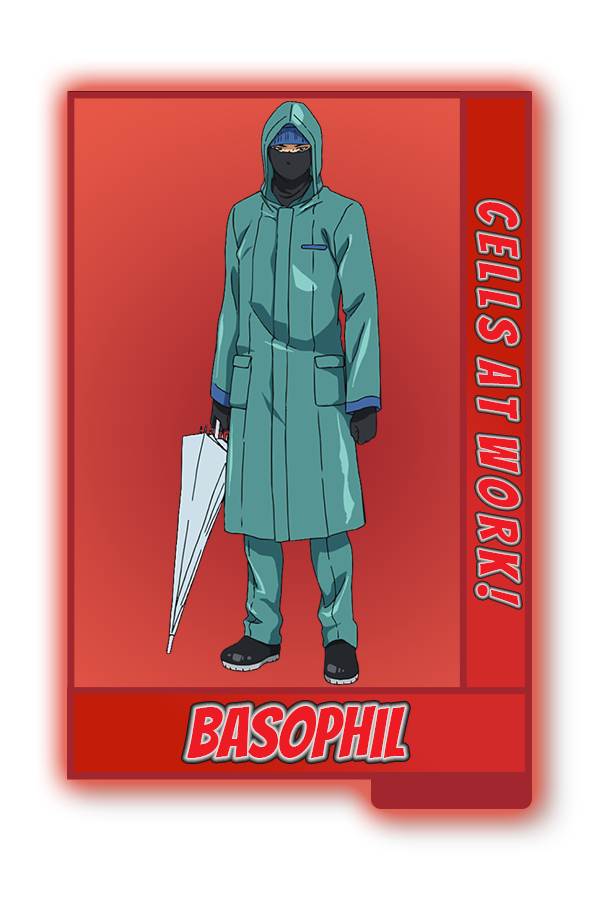
<style>
.page{position:relative;width:600px;height:900px;background:#ffffff}
.page>*{position:absolute;margin:0}
.t1{font:54px "Bangers-Regular";color:#ed1c24}
.t2{font:70px "Bangers-Regular";color:#ed1c24}
</style>
<div class="page">
<p class="t1" style="left:477px;top:202px;width:42px;height:404px;rotate:90deg">C e l l S  A t  W o r k !</p>
<p class="t2" style="left:186px;top:706px;width:219px;height:53px">Basophil</p>
</div>
